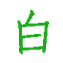
<style>
.page{position:relative;width:63px;height:63px;background:#ffffff}
.page>*{position:absolute;margin:0}
.t1{font:48px "·ÂËÎ-Regular";letter-spacing:0.025em;color:#1aad19;font-weight:bold}
</style>
<div class="page">
<p class="t1" style="left:17px;top:10px;width:32px;height:45px">白</p>
</div>
